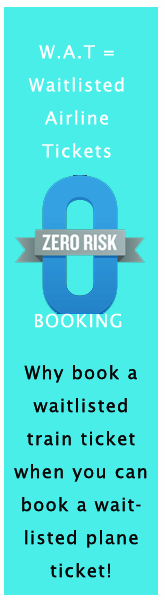
<style>
.page{position:relative;width:165px;height:600px;background:#49eee9}
.page>*{position:absolute;margin:0}
.t1{font:18px/33px "LucidaSans";letter-spacing:0.07em;color:#ffffff}
.t2{font:18px "LucidaSans";letter-spacing:0.07em;color:#ffffff}
.t3{font:18px/33px "LucidaSans";letter-spacing:0.07em;color:#060808}
</style>
<div class="page">
<p class="t1" style="left:28px;top:45px;width:96px;height:113px;text-align:center">W.A.T =<br>Waitlisted<br>Airline<br>Tickets</p>
<p class="t2" style="left:35px;top:313px;width:87px;height:15px">BOOKING</p>
<p class="t3" style="left:14px;top:365px;width:133px;height:213px;text-align:center">Why book a waitlisted train ticket when you can book a waitlisted plane ticket!</p>
</div>
